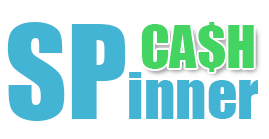
<style>
.page{position:relative;width:269px;height:139px;background:#ffffff}
.page>*{position:absolute;margin:0}
.t1{font:60px "Impact";color:#44b4d4}
.t2{font:120px "Impact";color:#44b4d4}
.t3{font:54px "Impact";color:#44d462}
</style>
<div class="page">
<p class="t1" style="left:7px;top:22px;width:251px;height:99px"><span class="t2">SP</span>inner</p>
<p class="t3" style="left:141px;top:22px;width:113px;height:50px">CA$H</p>
</div>
